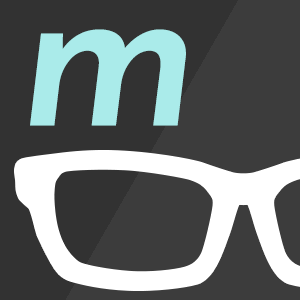
<style>
.page{position:relative;width:300px;height:300px;background:#3c3c3c}
.page>*{position:absolute;margin:0}
.t1{font:217px "JosefinSans-SemiBoldItalic";letter-spacing:0.1em;color:#aaebea}
</style>
<div class="page">
<p class="t1" style="left:30px;top:29px;width:156px;height:97px">m</p>
</div>
